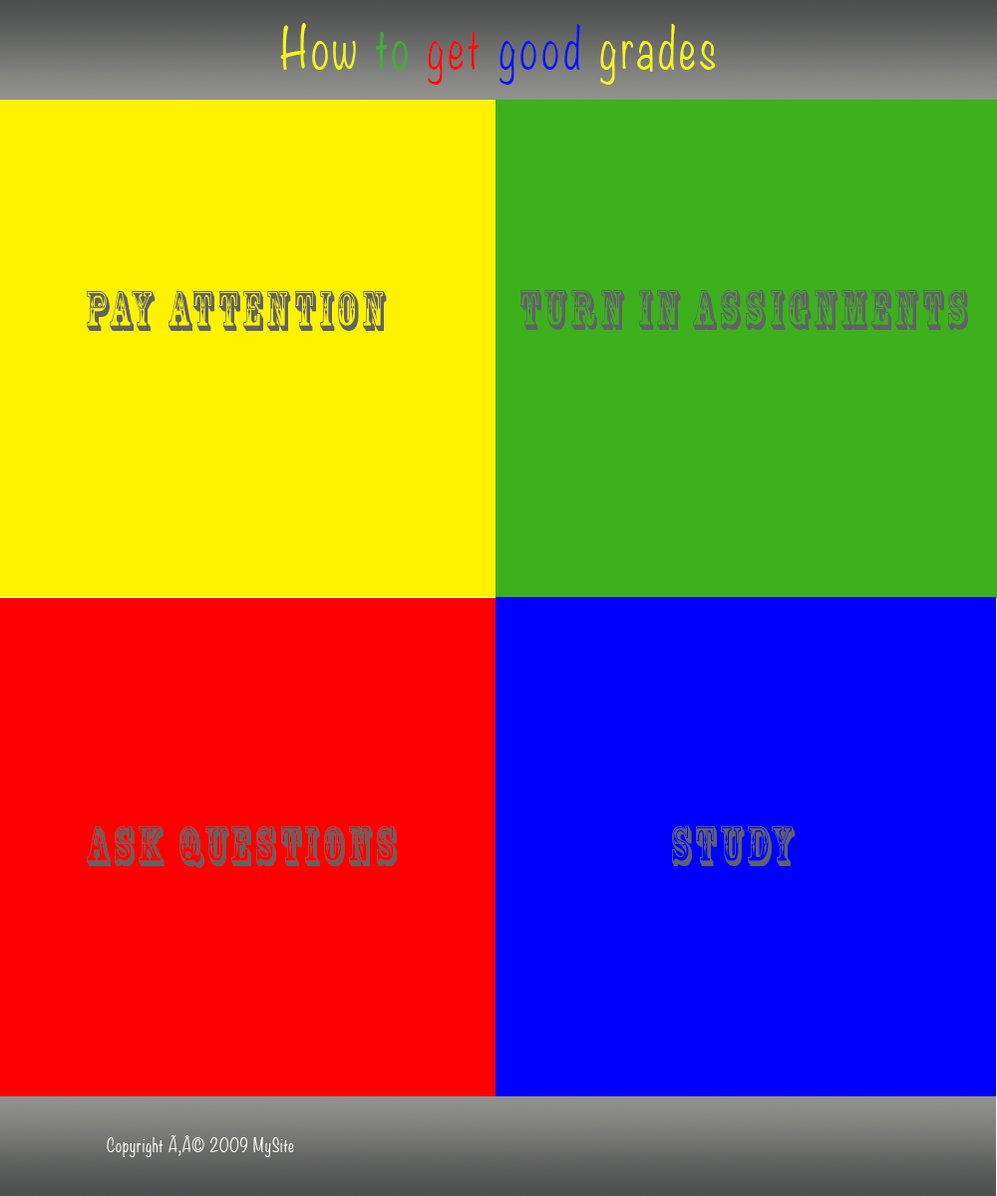
<style>
.page{position:relative;width:997px;height:1196px;background:#0000ff}
.page>*{position:absolute;margin:0}
.t1{font:52.6px "Noteworthy-Light";letter-spacing:0.1em;color:#f3f61d;scale:0.74 1}
.t2{font:52.6px "Noteworthy-Light";letter-spacing:0.1em;color:#3ab330;scale:0.74 1}
.t3{font:52.6px "Noteworthy-Light";letter-spacing:0.1em;color:#fa0d0d;scale:0.74 1}
.t4{font:52.6px "Noteworthy-Light";letter-spacing:0.1em;color:#0616f0;scale:0.74 1}
.t5{font:52.6px "RosewoodStd-Regular";letter-spacing:0.1em;color:#606363;scale:0.74 1}
.t6{font:17.2px/303px "Noteworthy-Light";letter-spacing:0.1em;color:#f9f9f9;scale:0.74 1}
</style>
<div class="page">
<p class="t1" style="left:280px;top:23px;width:436px;height:62px">How <span class="t2">to </span><span class="t3">get </span><span class="t4">good </span>grades</p>
<p class="t5" style="left:87px;top:291px;width:300px;height:40px">Pay Attention</p>
<p class="t5" style="left:520px;top:290px;width:448px;height:40px">Turn in assignments</p>
<p class="t5" style="left:87px;top:826px;width:310px;height:42px">Ask questions</p>
<p class="t5" style="left:672px;top:826px;width:123px;height:40px">Study</p>
<p class="t6" style="left:107px;top:1135px;width:187px;height:22px;text-align:center">Copyright Ã‚Â© 2009 MySite <br>All Rights Reserved</p>
</div>
